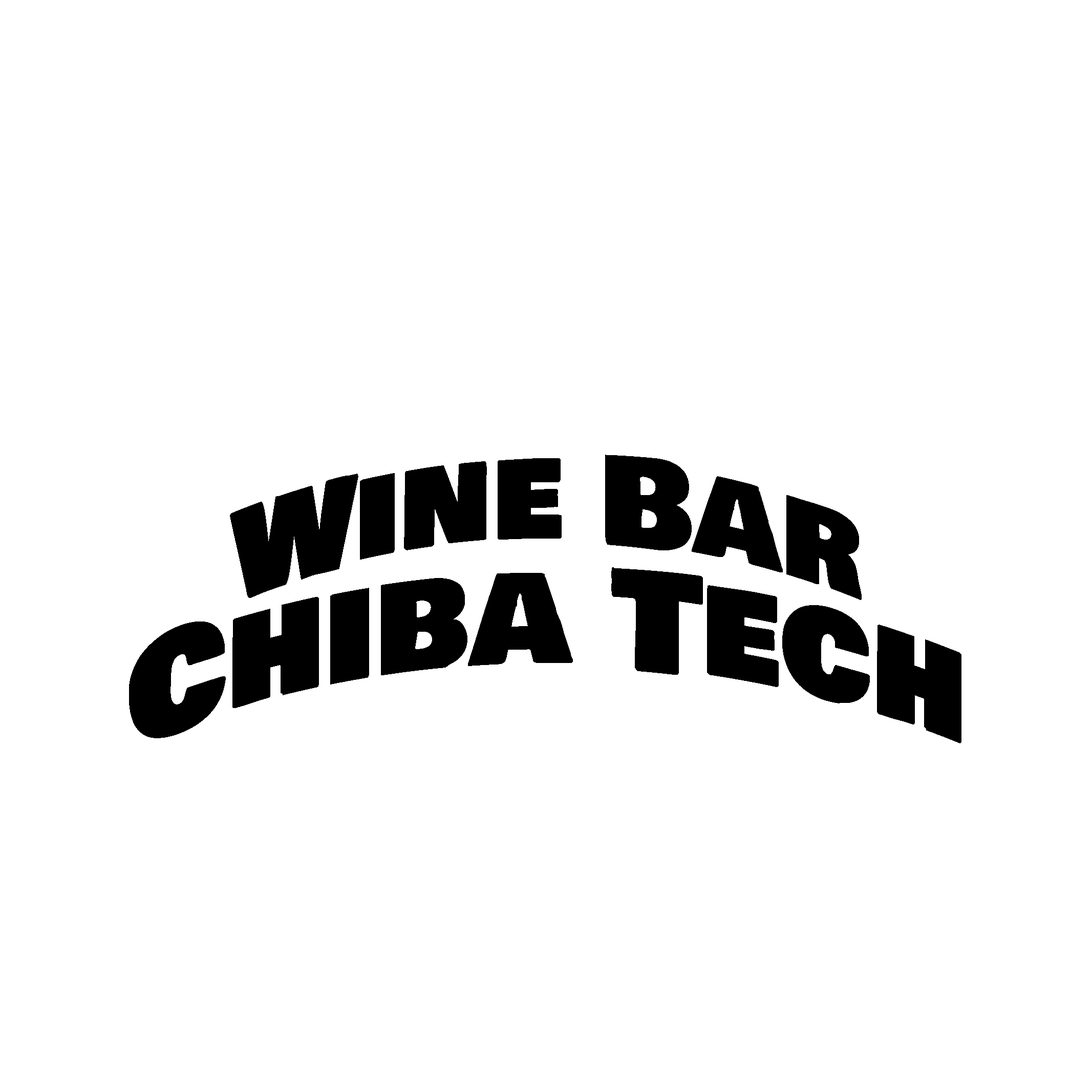
<style>
.page{position:relative;width:1092px;height:1092px;background:#ffffff}
.page>*{position:absolute;margin:0}
.t1{font:120.9px "BowlbyOneSC-Regular";color:#000000}
.t2{font:136.3px "BowlbyOneSC-Regular";color:#000000}
</style>
<div class="page">
<p class="t1" style="left:230px;top:455px;width:632px;height:145px">Wine Bar</p>
<p class="t2" style="left:129px;top:567px;width:832px;height:176px">Chiba Tech</p>
</div>
